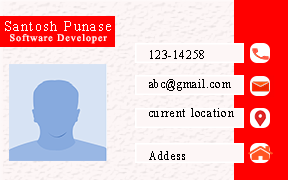
<style>
.page{position:relative;width:288px;height:180px;background:#fdf6f6}
.page>*{position:absolute;margin:0}
.t1{font:14px "TimesNewRomanPSMT";letter-spacing:0.1em;color:#fdf9f9}
.t2{font:10px "TimesNewRomanPSMT";letter-spacing:0.1em;color:#fdf9f9}
.t3{font:12px "TimesNewRomanPSMT";letter-spacing:0.1em;color:#000000;scale:0.93 1}
</style>
<div class="page">
<p class="t1" style="left:5px;top:21px;width:106px;height:10px">Santosh Punase</p>
<p class="t2" style="left:10px;top:34px;width:97px;height:10px">Software Developer</p>
<p class="t3" style="left:149px;top:50px;width:85px;height:110px">123-14258<br><br>abc@gmail.com<br><br>current location<br><br><br>Addess</p>
</div>
